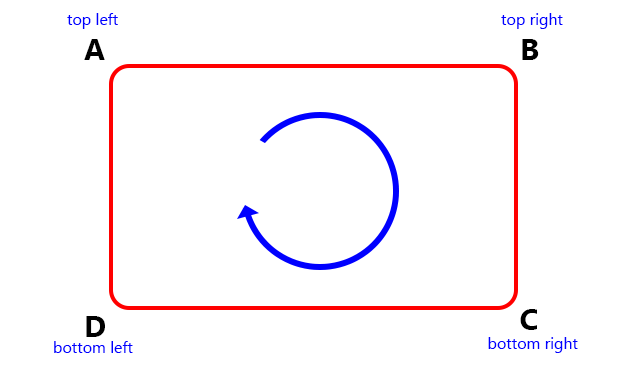
<style>
.page{position:relative;width:626px;height:366px;background:#ffffff}
.page>*{position:absolute;margin:0}
.t1{font:16px "SegoeUI";color:#0000ff}
.t2{font:30px "SegoeUI-Bold";color:#000000}
</style>
<div class="page">
<p class="t1" style="left:67px;top:13px;width:51px;height:16px">top left</p>
<p class="t1" style="left:501px;top:13px;width:62px;height:16px">top right</p>
<p class="t2" style="left:84px;top:39px;width:21px;height:21px">A</p>
<p class="t2" style="left:522px;top:39px;width:17px;height:21px">B</p>
<p class="t2" style="left:86px;top:316px;width:19px;height:21px">D</p>
<p class="t2" style="left:520px;top:309px;width:17px;height:21px">C</p>
<p class="t1" style="left:54px;top:341px;width:79px;height:12px">bottom left</p>
<p class="t1" style="left:488px;top:337px;width:90px;height:16px">bottom right</p>
</div>
